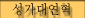
<style>
.page{position:relative;width:85px;height:18px;background:#ffcc66}
.page>*{position:absolute;margin:0}
.t1{font:13.2px "BatangChe";scale:0.91 1}
</style>
<div class="page">
<p class="t1" style="left:12px;top:3px;width:58px;height:13px">성가대연혁</p>
</div>
